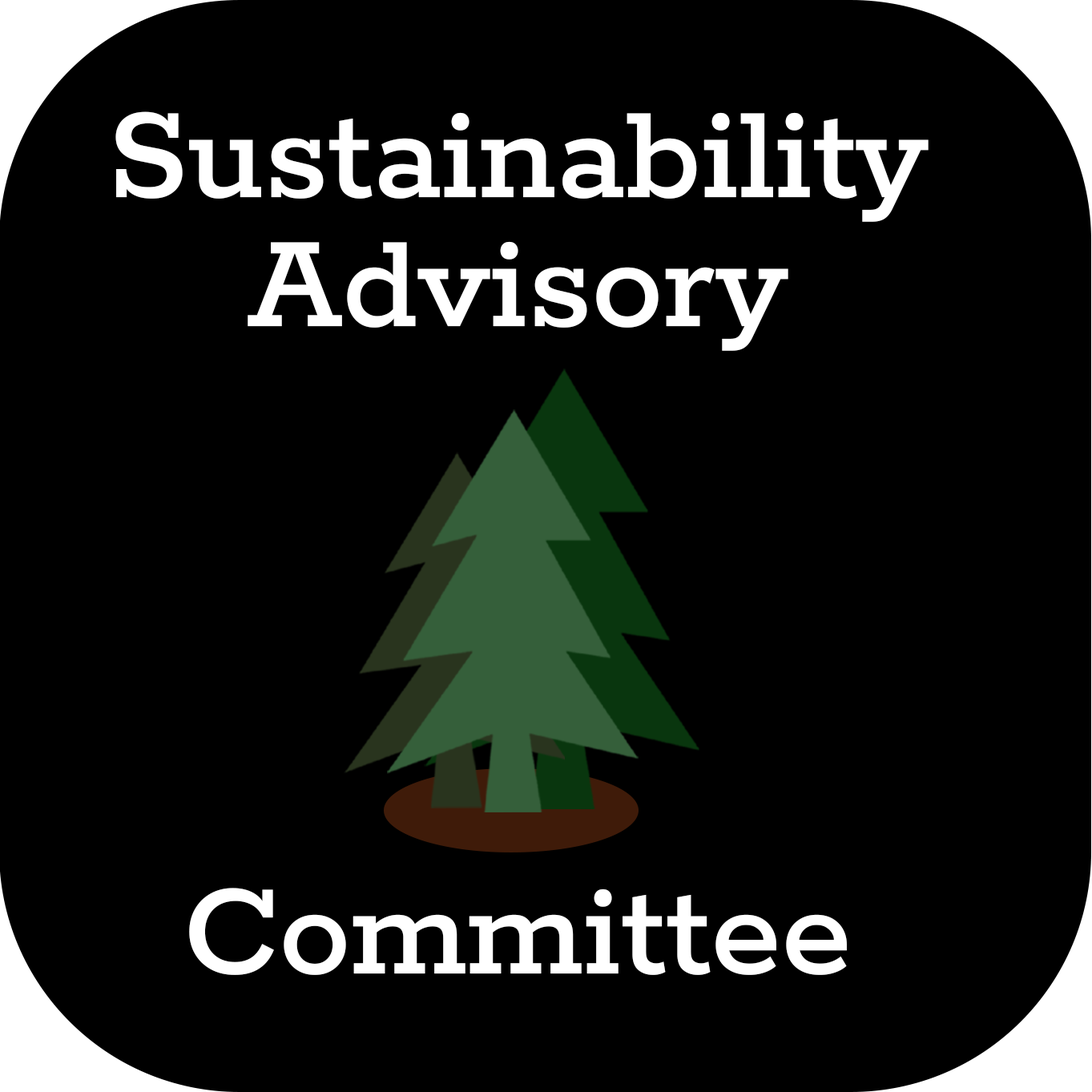
<style>
.page{position:relative;width:1092px;height:1092px;background:#000000}
.page>*{position:absolute;margin:0}
.t1{font:143.6px/129.4px "Rokkitt-Medium";color:#ffffff}
</style>
<div class="page">
<p class="t1" style="left:115px;top:111px;width:814px;height:864px;text-align:center">Sustainability<br>Advisory<br><br><br><br><br>Committee</p>
</div>
